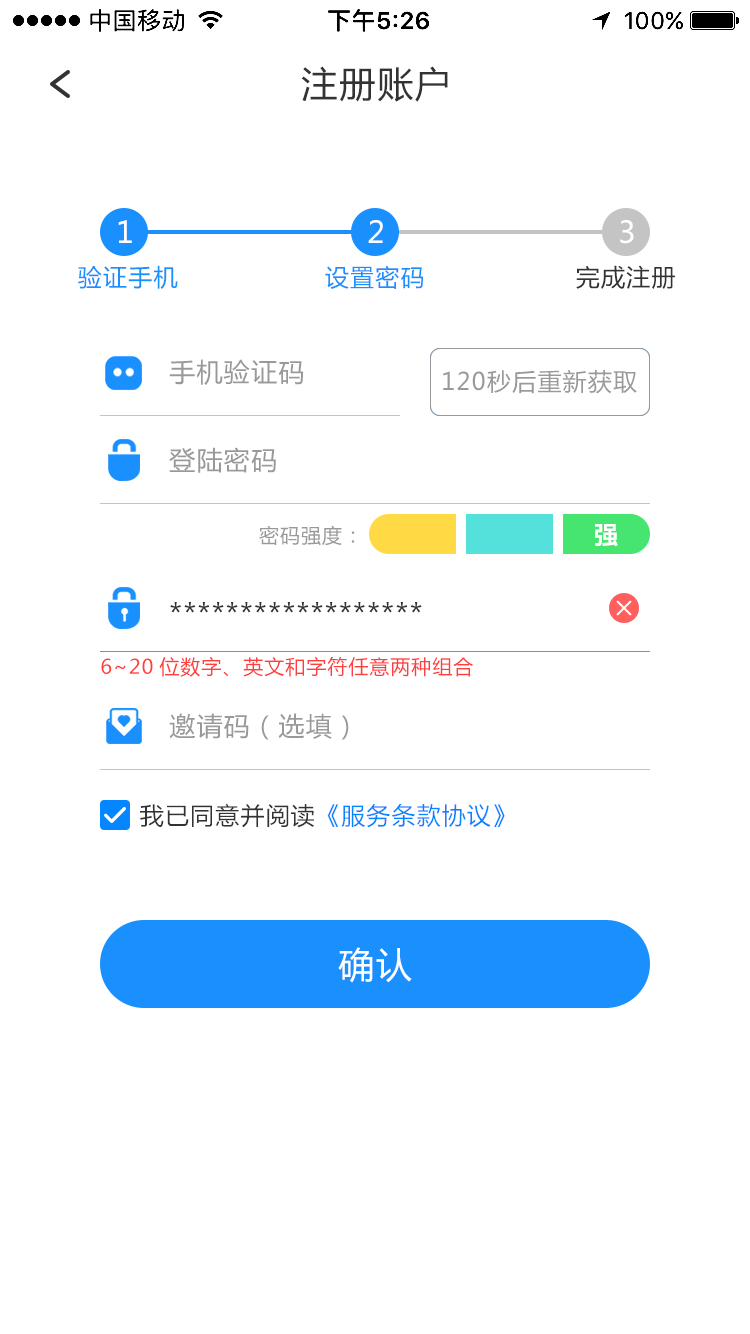
<style>
.page{position:relative;width:750px;height:1334px;background:#ffffff}
.page>*{position:absolute;margin:0}
.t1{font:36px "MicrosoftYaHei";letter-spacing:0.05em;color:#333333}
.t2{font:30px "MicrosoftYaHei";letter-spacing:0.05em;color:#ffffff}
.t3{font:24px "MicrosoftYaHei";letter-spacing:0.05em;color:#1990fe}
.t4{font:24px "MicrosoftYaHei";letter-spacing:0.05em;color:#333333}
.t5{font:26px "MicrosoftYaHei";letter-spacing:0.05em;color:#999999}
.t6{font:24px "MicrosoftYaHei";letter-spacing:0.05em;color:#999999}
.t7{font:20px "MicrosoftYaHei";letter-spacing:0.05em;color:#999999}
.t8{font:24px "MicrosoftYaHei-Bold";letter-spacing:0.05em;color:#ffffff}
.t9{font:28px "MicrosoftYaHei";letter-spacing:0.05em;color:#333333}
.t10{font:20px "MicrosoftYaHei";letter-spacing:0.05em;color:#ff3e3e}
.t11{font:24px "MicrosoftYaHei";letter-spacing:0.05em;color:#0386ff}
.t12{font:36px "MicrosoftYaHei";letter-spacing:0.05em;color:#ffffff}
</style>
<div class="page">
<p class="t1" style="left:301px;top:66px;width:147px;height:36px">注册账户</p>
<p class="t2" style="left:118px;top:220px;width:14px;height:23px">1</p>
<p class="t2" style="left:368px;top:220px;width:15px;height:23px">2</p>
<p class="t2" style="left:620px;top:220px;width:14px;height:24px">3</p>
<p class="t3" style="left:78px;top:265px;width:100px;height:24px">验证手机</p>
<p class="t3" style="left:325px;top:265px;width:98px;height:24px">设置密码</p>
<p class="t4" style="left:576px;top:265px;width:99px;height:24px">完成注册</p>
<p class="t5" style="left:169px;top:359px;width:135px;height:26px">手机验证码</p>
<p class="t6" style="left:443px;top:369px;width:194px;height:25px">120秒后重新获取</p>
<p class="t5" style="left:169px;top:447px;width:107px;height:26px">登陆密码</p>
<p class="t7" style="left:259px;top:525px;width:96px;height:21px">密码强度：</p>
<p class="t8" style="left:594px;top:524px;width:24px;height:23px">强</p>
<p class="t9" style="left:170px;top:602px;width:252px;height:11px">******************</p>
<p class="t10" style="left:101px;top:656px;width:372px;height:21px">6~20位数字、英文和字符任意两种组合</p>
<p class="t5" style="left:169px;top:713px;width:180px;height:27px">邀请码（选填）</p>
<p class="t11" style="left:140px;top:803px;width:365px;height:25px"><span class="t4">我已同意并阅读</span>《服务条款协议》</p>
<p class="t12" style="left:338px;top:947px;width:74px;height:36px">确认</p>
</div>
